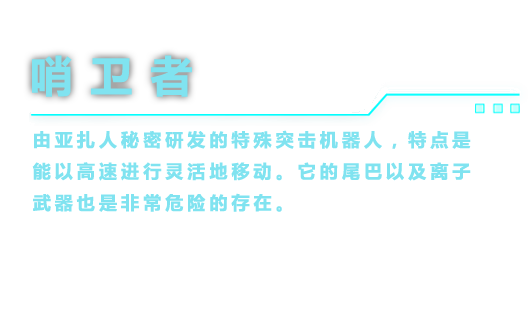
<style>
.page{position:relative;width:528px;height:312px;background:#ffffff}
.page>*{position:absolute;margin:0}
.t1{font:42px "MicrosoftYaHei-Bold";letter-spacing:0.4em;color:#80e3f0;font-weight:bold}
.t2{font:18px "MicrosoftYaHei-Bold";letter-spacing:0.2em;color:#80e3f0;font-weight:bold}
</style>
<div class="page">
<p class="t1" style="left:32px;top:55px;width:160px;height:42px">哨卫者</p>
<p class="t2" style="left:32px;top:130px;width:439px;height:82px">由亚扎人秘密研发的特殊突击机器人，特点是<br>能以高速进行灵活地移动。它的尾巴以及离子<br>武器也是非常危险的存在。</p>
</div>
